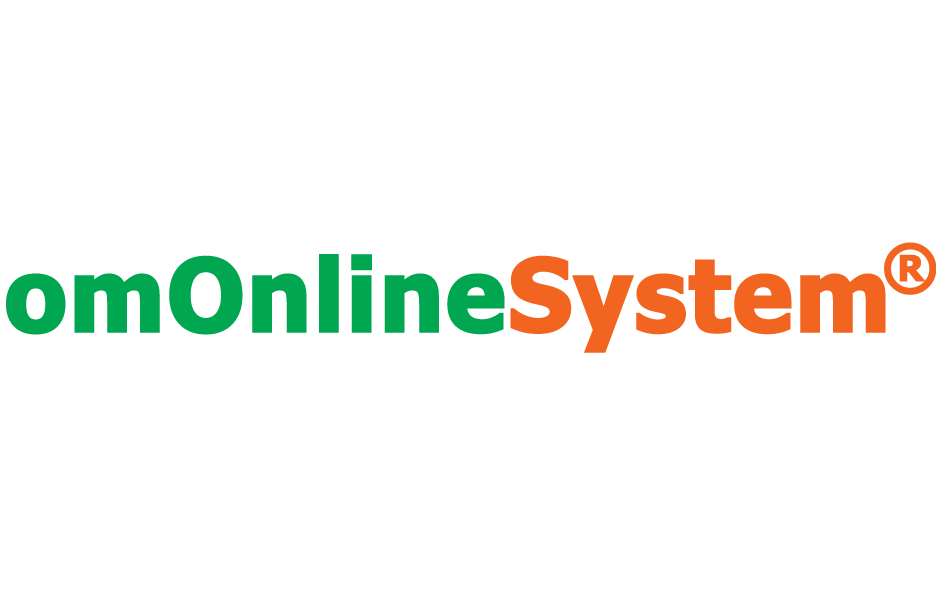
<style>
.page{position:relative;width:936px;height:600px;background:#ffffff}
.page>*{position:absolute;margin:0}
.t1{font:60px "Tahoma-Bold";color:#f26521;font-weight:bold}
.t2{font:100px "Tahoma-Bold";color:#00a650;font-weight:bold}
.t3{font:100px "Tahoma-Bold";color:#f26521;font-weight:bold}
</style>
<div class="page">
<p class="t1" style="left:884px;top:242px;width:53px;height:53px">®</p>
<p class="t2" style="left:6px;top:254px;width:880px;height:99px">omOnline<span class="t3">System</span></p>
</div>
